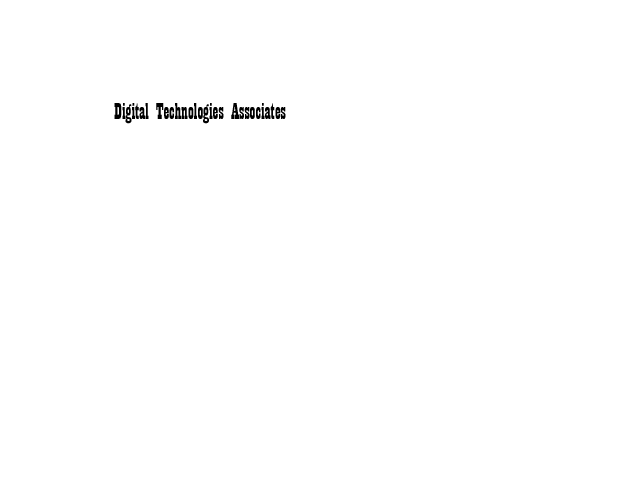
<style>
.page{position:relative;width:640px;height:480px;background:#ffffff}
.page>*{position:absolute;margin:0}
.t1{font:24px "Playbill";color:#000000}
</style>
<div class="page">
<p class="t1" style="left:114px;top:103px;width:172px;height:21px">Digital Technologies Associates</p>
</div>
